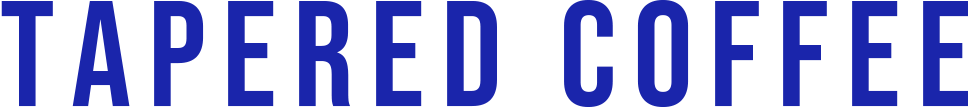
<style>
.page{position:relative;width:968px;height:107px;background:#ffffff}
.page>*{position:absolute;margin:0}
.t1{font:150px "BebasNeue-Regular";letter-spacing:0.11em;color:#1a25ab}
</style>
<div class="page">
<p class="t1" style="left:1px;top:0px;width:968px;height:107px">TAPERED COFFEE</p>
</div>
